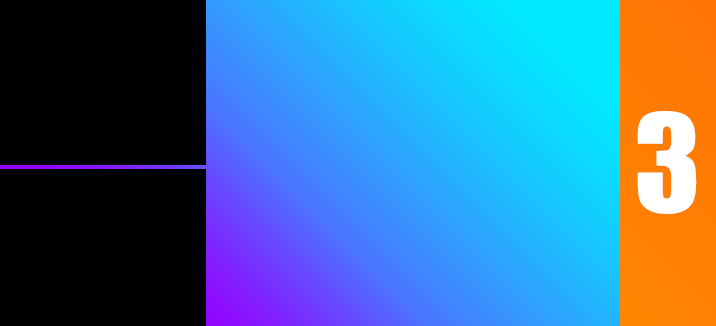
<style>
.page{position:relative;width:716px;height:326px;background:#000000}
.page>*{position:absolute;margin:0}
.t1{font:125px "Impact";color:#ffffff}
</style>
<div class="page">
<p class="t1" style="left:637px;top:111px;width:60px;height:103px">3</p>
</div>
